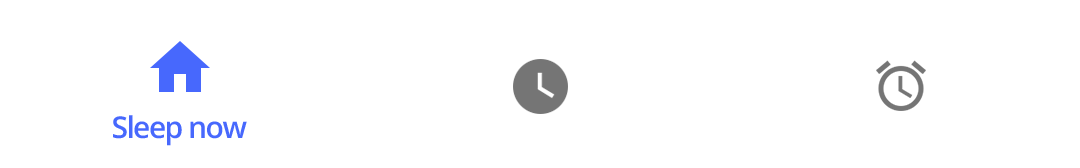
<style>
.page{position:relative;width:1080px;height:168px;background:#ffffff}
.page>*{position:absolute;margin:0}
.t1{font:30px "OpenSans-SemiBold";letter-spacing:-0.05em;color:#4768fd}
</style>
<div class="page">
<p class="t1" style="left:113px;top:115px;width:134px;height:31px">Sleep now</p>
</div>
